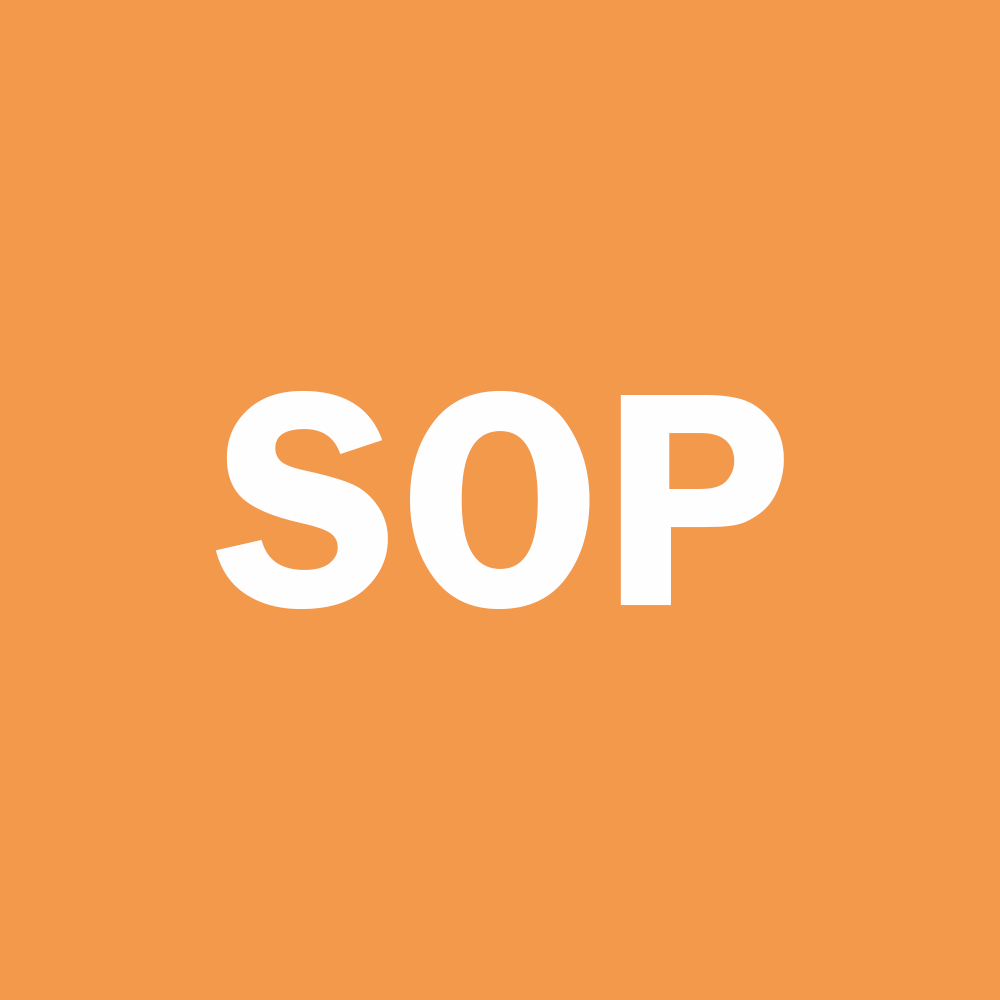
<style>
.page{position:relative;width:1000px;height:1000px;background:#f2994b}
.page>*{position:absolute;margin:0}
.t1{font:314.7px "FranklinGothic-Demi";color:#fefefe}
</style>
<div class="page">
<p class="t1" style="left:216px;top:391px;width:568px;height:218px">SOP</p>
</div>
